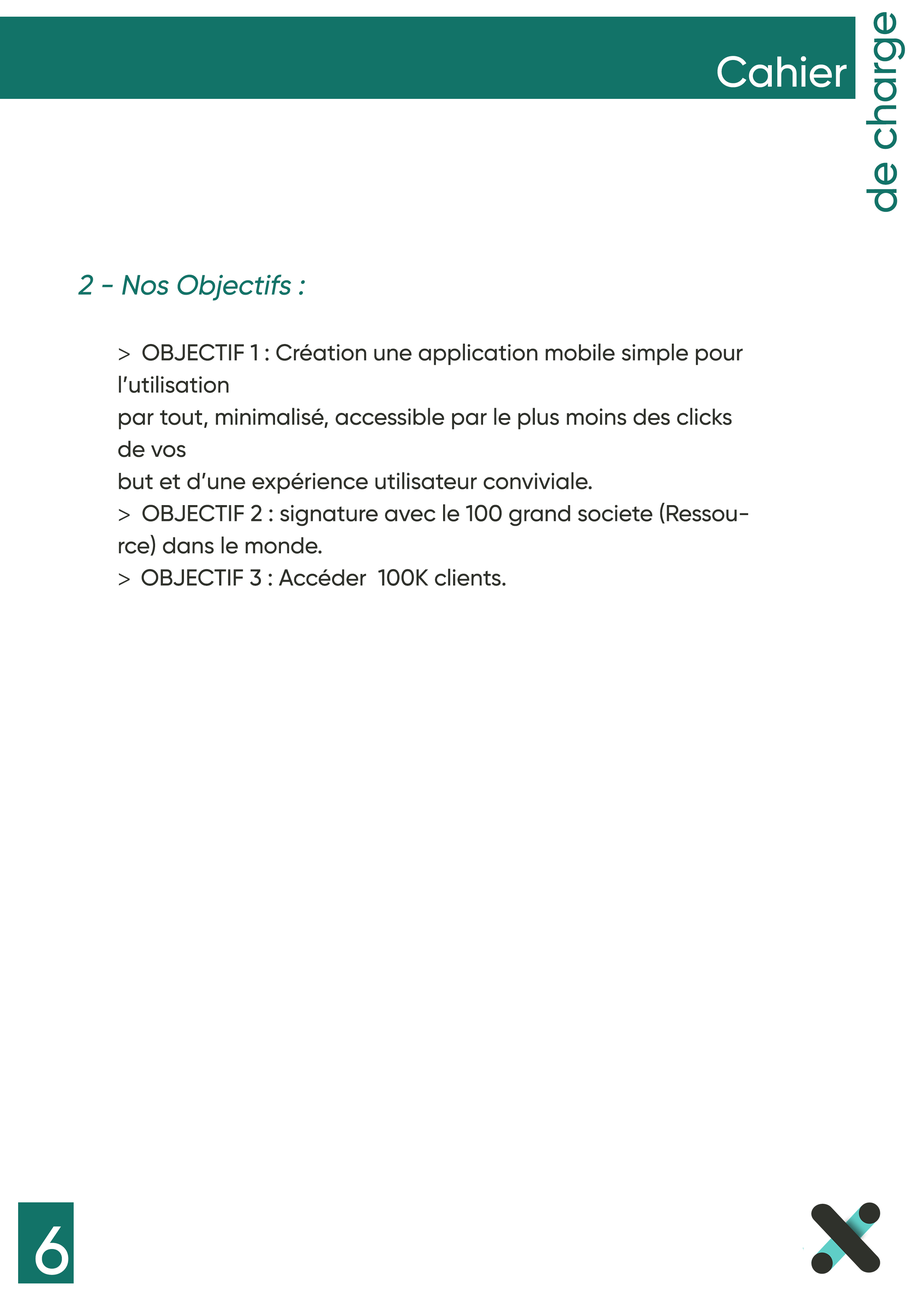
<style>
.page{position:relative;width:918px;height:1299px;background:#ffffff}
.page>*{position:absolute;margin:0}
.t1{font:42.9px "Gilroy-Medium";color:#127368}
.t2{font:42.9px "Gilroy-Medium";color:#ffffff}
.t3{font:27.8px "Gilroy-Medium";color:#127368;font-style:italic}
.t4{font:22.9px/32.1px "Gilroy-Medium";color:#2f312b}
.t5{font:22.9px/32.1px "MyriadPro-Regular";color:#2f312b}
.t6{font:67.6px "Gilroy-Medium";color:#ffffff}
</style>
<div class="page">
<p class="t1" style="left:866px;top:12px;width:39px;height:200px;rotate:-90deg">de charge</p>
<p class="t2" style="left:717px;top:56px;width:130px;height:31px">Cahier</p>
<p class="t3" style="left:78px;top:274px;width:227px;height:27px">2 - Nos Objectifs :</p>
<p class="t4" style="left:118px;top:344px;width:631px;height:242px"><span class="t5">&gt; </span> OBJECTIF 1 : Création une application mobile simple pour l’utilisation<br>par tout, minimalisé, accessible par le plus moins des clicks de vos <br>but et d’une expérience utilisateur conviviale.<br><span class="t5">&gt; </span> OBJECTIF 2 : signature avec le 100 grand societe (Ressource) dans le monde.<br><span class="t5">&gt;  </span>OBJECTIF 3 : Accéder  100K clients.</p>
<p class="t6" style="left:36px;top:1226px;width:32px;height:49px">6</p>
</div>
